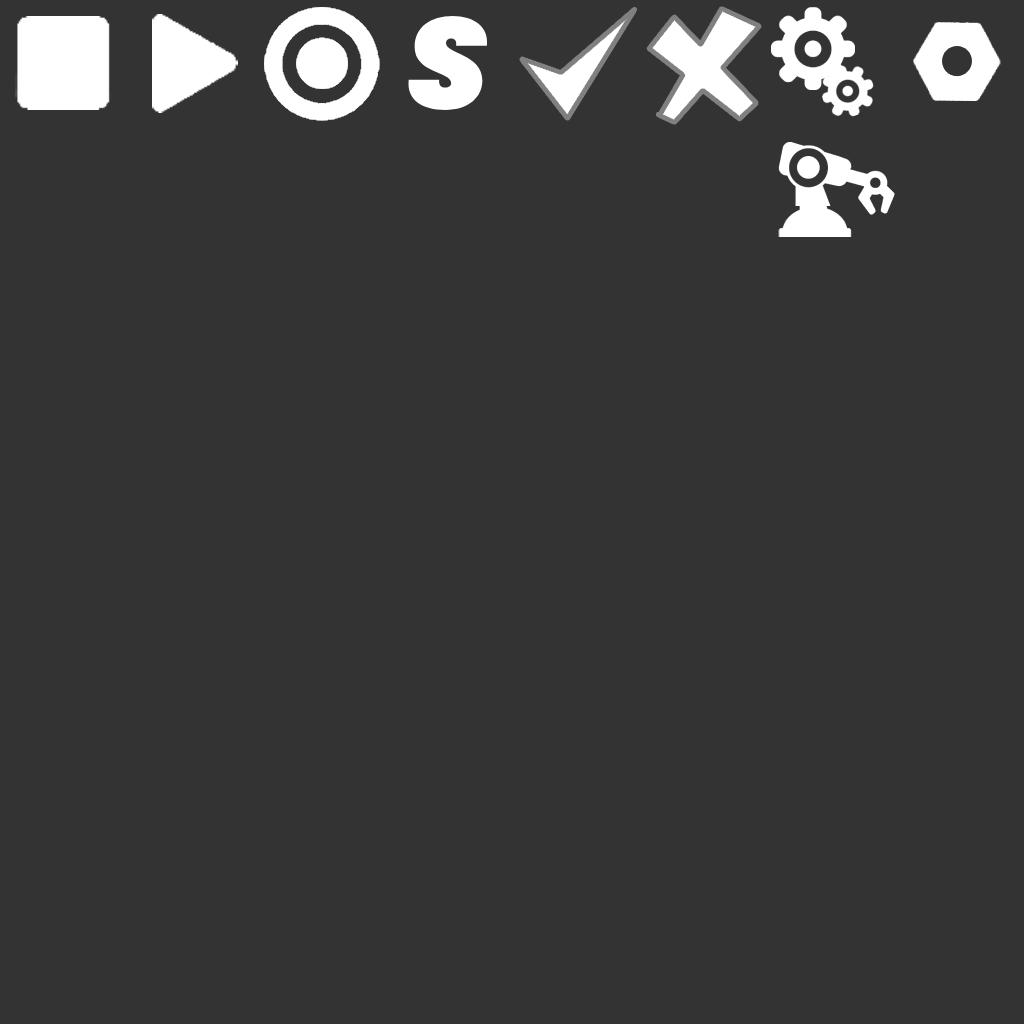
<style>
.page{position:relative;width:1024px;height:1024px;background:#333333}
.page>*{position:absolute;margin:0}
.t1{font:129px "Poppins-BlackItalic";color:#ffffff}
</style>
<div class="page">
<p class="t1" style="left:406px;top:16px;width:84px;height:94px">S</p>
</div>
